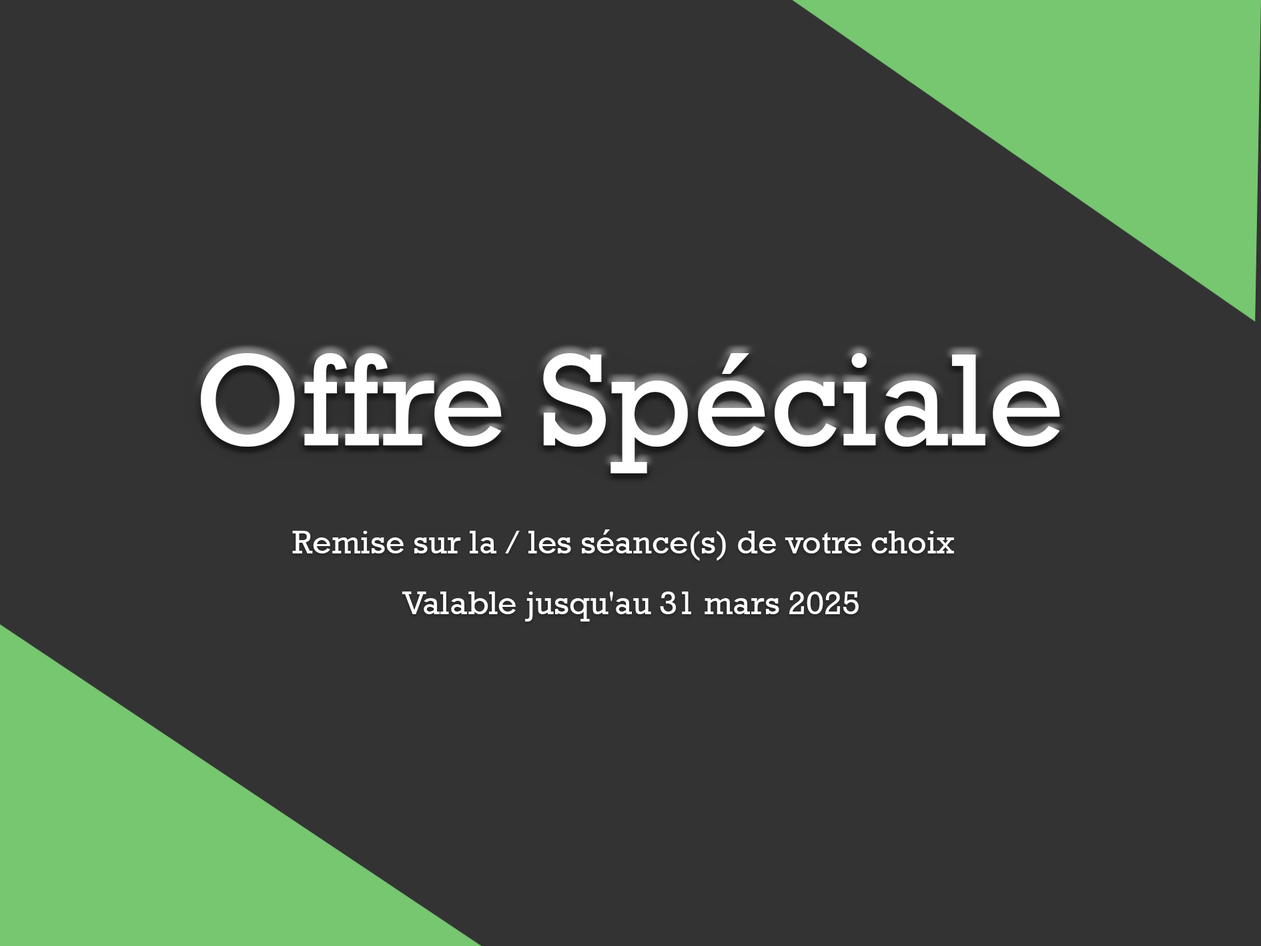
<style>
.page{position:relative;width:1261px;height:946px;background:#333333}
.page>*{position:absolute;margin:0}
.t1{font:133.5px "Rockwell";color:#ffffff}
.t2{font:33.4px "Rockwell";color:#ffffff}
</style>
<div class="page">
<p class="t1" style="left:200px;top:353px;width:860px;height:120px">Offre Spéciale</p>
<p class="t2" style="left:292px;top:529px;width:662px;height:32px">Remise sur la / les séance(s) de votre choix</p>
<p class="t2" style="left:402px;top:591px;width:457px;height:30px">Valable jusqu'au 31 mars 2025</p>
</div>
